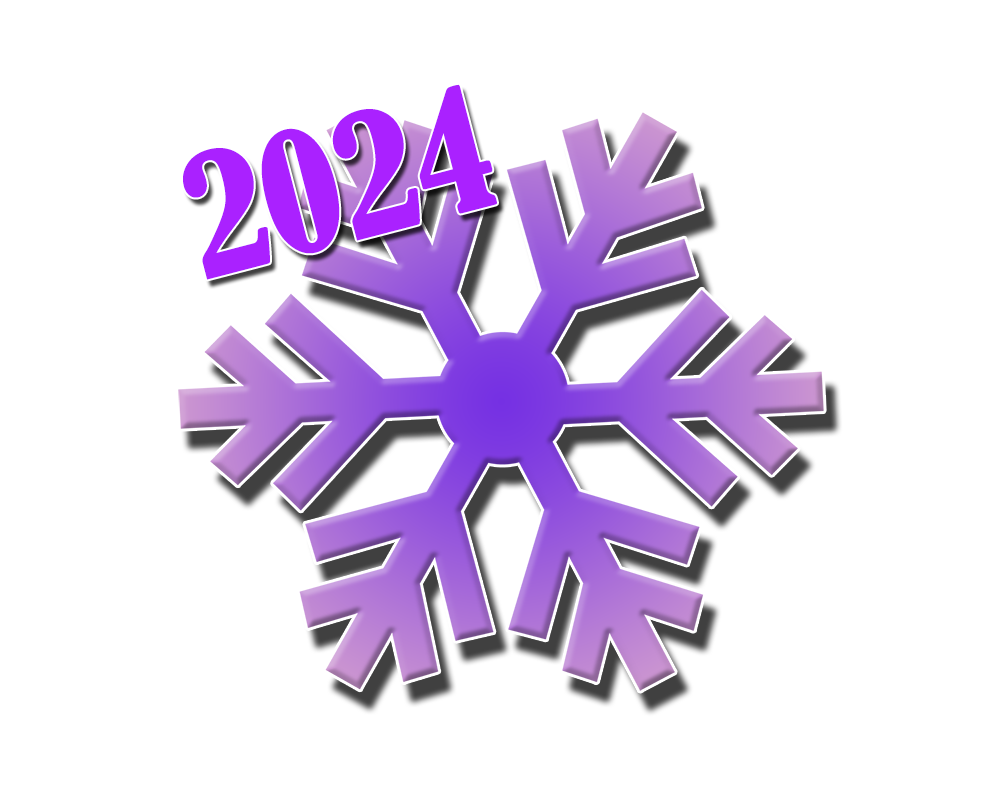
<style>
.page{position:relative;width:1000px;height:800px;background:#ffffff}
.page>*{position:absolute;margin:0}
.t1{font:158.2px "BernardMT-Condensed";color:#aa21ff}
</style>
<div class="page">
<p class="t1" style="left:183px;top:84px;width:314px;height:196px;rotate:-15deg">2024</p>
</div>
